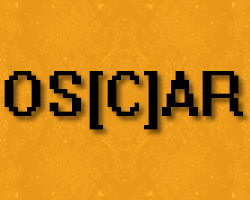
<style>
.page{position:relative;width:250px;height:200px}
.page>*{position:absolute;margin:0}
.t1{font:72px "System";color:#000000}
</style>
<div class="page">
<p class="t1" style="left:4px;top:71px;width:239px;height:59px">OS[C]AR</p>
</div>
